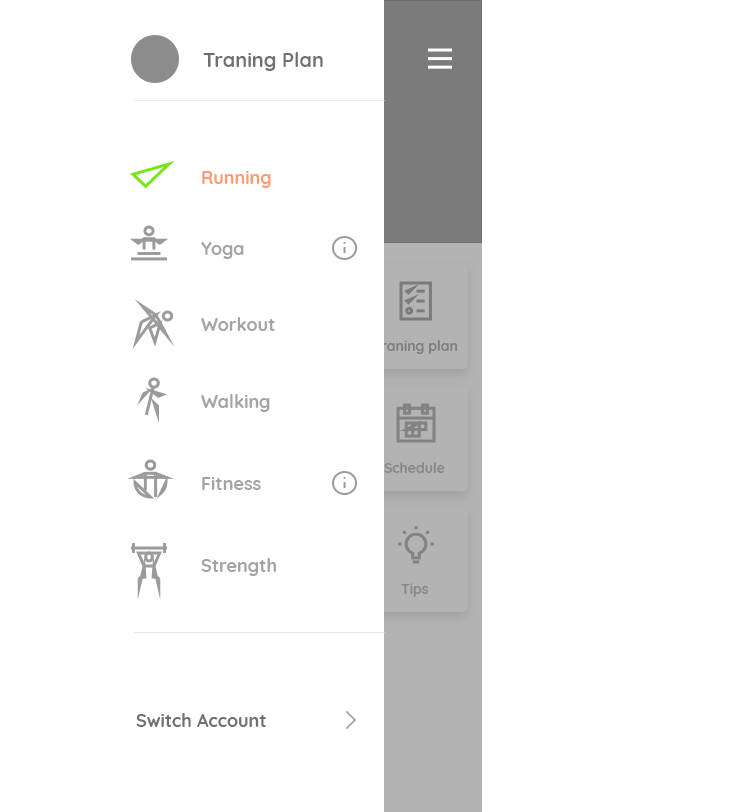
<style>
.page{position:relative;width:743px;height:812px;background:#ffffff}
.page>*{position:absolute;margin:0}
.t1{font:20px "Quicksand-Bold";color:#707070}
.t2{font:18px "Quicksand-Bold";color:#ff9b70}
.t3{font:18px "Quicksand-Bold";color:#a3a3a3}
.t4{font:14px "Quicksand-Bold";color:#707070}
.t5{font:18px "Quicksand-Bold";color:#707070}
</style>
<div class="page">
<p class="t1" style="left:203px;top:52px;width:120px;height:19px">Traning Plan</p>
<p class="t2" style="left:202px;top:171px;width:69px;height:17px">Running</p>
<p class="t3" style="left:201px;top:242px;width:43px;height:17px">Yoga</p>
<p class="t3" style="left:201px;top:317px;width:74px;height:14px">Workout</p>
<p class="t4" style="left:373px;top:340px;width:85px;height:14px;opacity:0.8">Traning plan</p>
<p class="t3" style="left:201px;top:394px;width:69px;height:18px">Walking</p>
<p class="t4" style="left:384px;top:462px;width:61px;height:11px;opacity:0.7">Schedule</p>
<p class="t3" style="left:202px;top:477px;width:59px;height:13px">Fitness</p>
<p class="t3" style="left:201px;top:558px;width:75px;height:18px">Strength</p>
<p class="t4" style="left:401px;top:583px;width:28px;height:14px;opacity:0.7">Tips</p>
<p class="t5" style="left:136px;top:713px;width:130px;height:14px">Switch Account</p>
</div>
